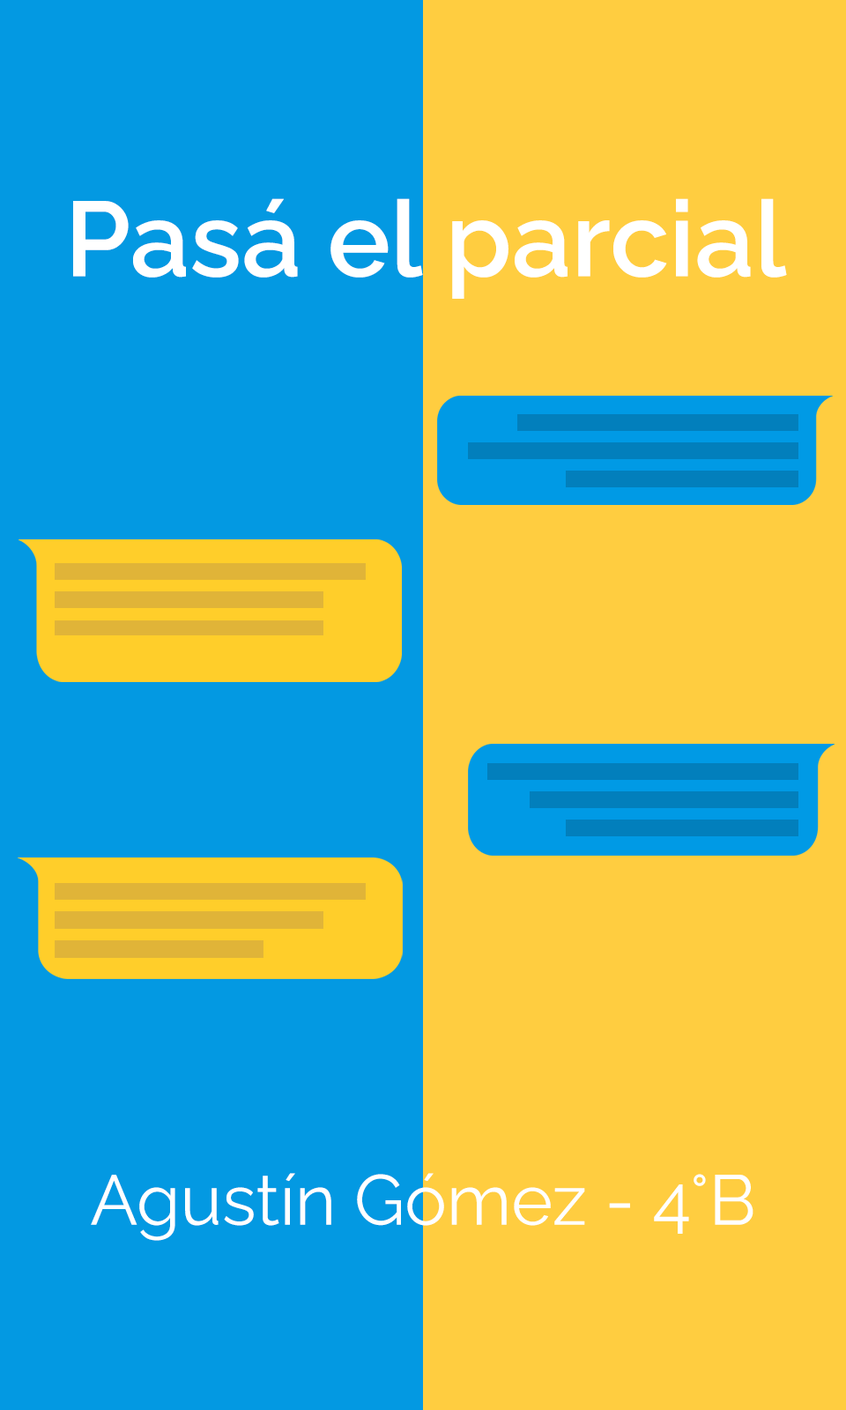
<style>
.page{position:relative;width:846px;height:1410px;background:#ffcd40}
.page>*{position:absolute;margin:0}
.t1{font:105.7px "RalewayRoman-SemiBold";color:#ffffff}
.t2{font:70.5px "RalewayRoman-Regular";color:#ffffff}
</style>
<div class="page">
<p class="t1" style="left:73px;top:198px;width:714px;height:101px">Pasá el parcial</p>
<p class="t2" style="left:91px;top:1173px;width:662px;height:68px">Agustín Gómez - 4°B</p>
</div>
